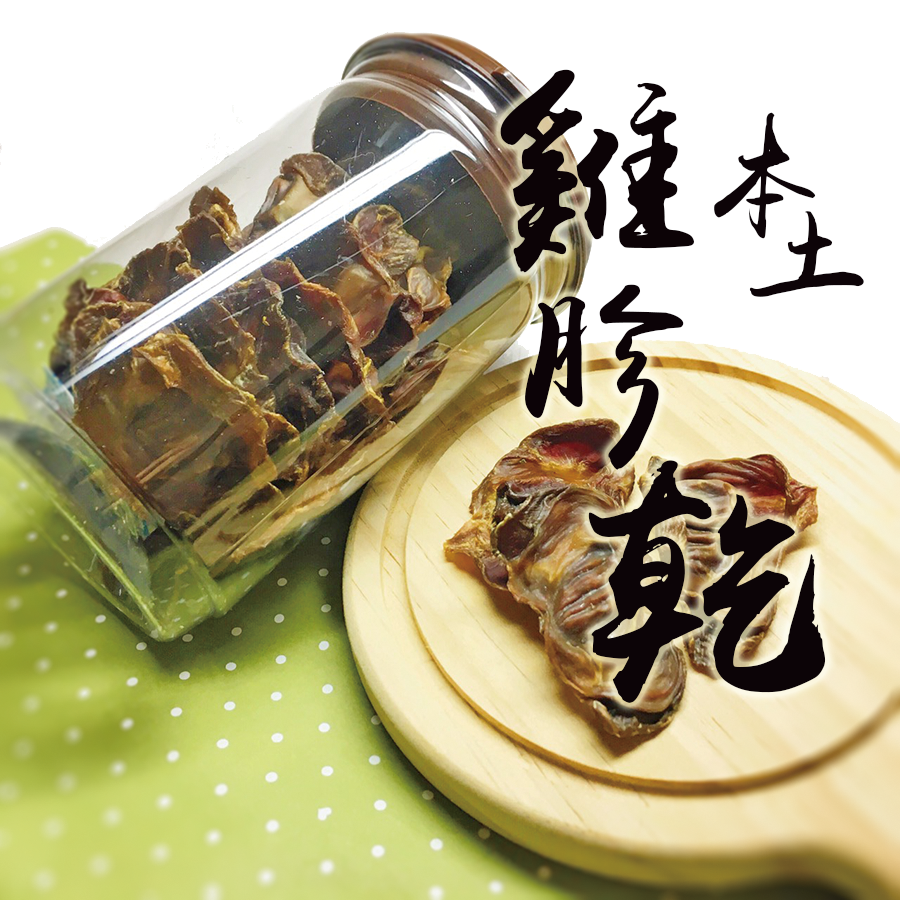
<style>
.page{position:relative;width:900px;height:900px;background:#ffffff}
.page>*{position:absolute;margin:0}
.t1{font:222.3px "yuweijmfx";letter-spacing:0.2em;color:#000000}
.t2{font:125.2px "yuweijmfx";letter-spacing:0.2em;color:#000000}
.t3{font:193.1px "yuweijmfx";letter-spacing:0.2em;color:#000000}
.t4{font:264.9px "yuweijmfx";letter-spacing:0.2em;color:#000000}
</style>
<div class="page">
<p class="t1" style="left:500px;top:69px;width:194px;height:204px">雞</p>
<p class="t2" style="left:714px;top:112px;width:102px;height:127px">本</p>
<p class="t2" style="left:749px;top:211px;width:115px;height:86px">土</p>
<p class="t3" style="left:525px;top:284px;width:159px;height:186px">胗</p>
<p class="t4" style="left:588px;top:460px;width:238px;height:243px">乾</p>
</div>
